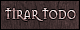
<style>
.page{position:relative;width:80px;height:30px}
.page>*{position:absolute;margin:0}
.t1{font:13.2px "Mason-Regular";scale:0.81 1}
</style>
<div class="page">
<p class="t1" style="left:5px;top:8px;width:71px;height:13px">TIRAR TODO</p>
</div>
